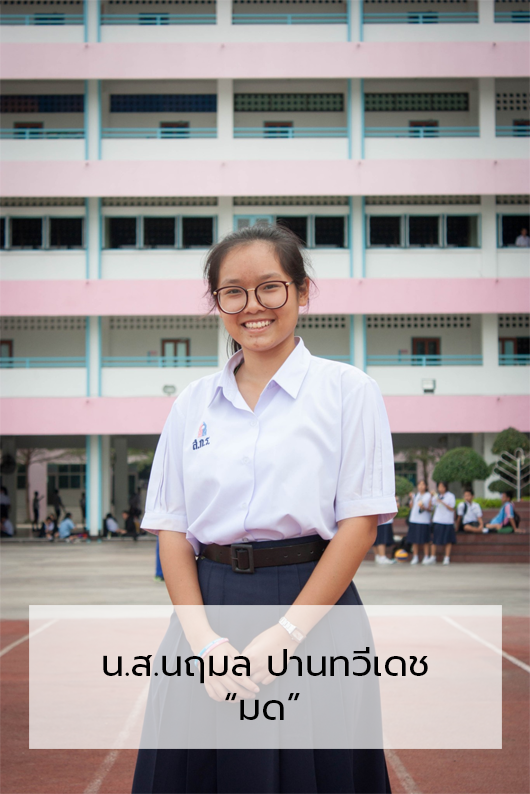
<style>
.page{position:relative;width:530px;height:794px}
.page>*{position:absolute;margin:0}
.t1{font:36.7px "Prompt-Regular";color:#000000}
</style>
<div class="page">
<p class="t1" style="left:103px;top:647px;width:325px;height:73px">น.ส.นฤมล ปานทวีเดช<br>         “มด”</p>
</div>
